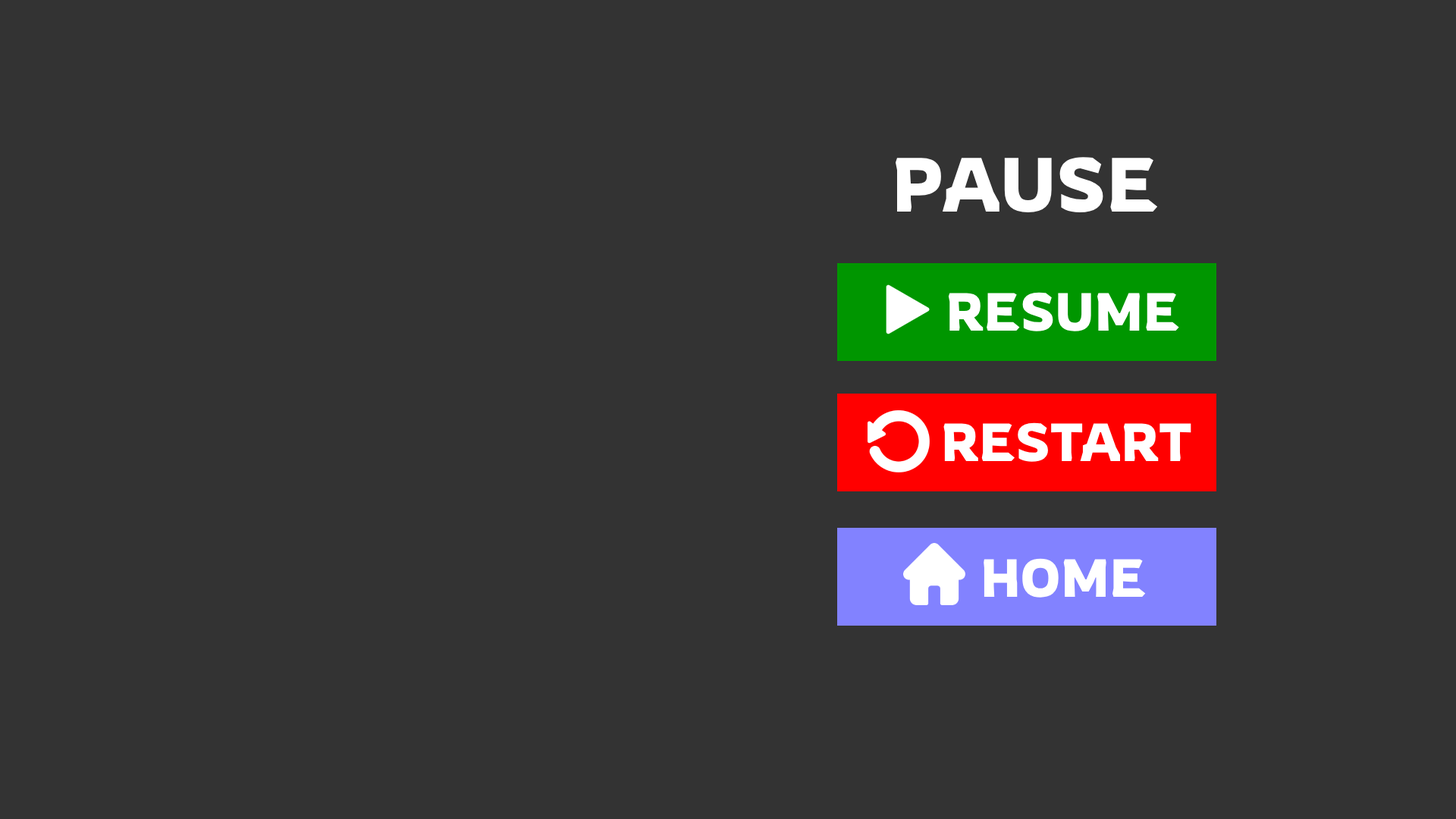
<style>
.page{position:relative;width:1456px;height:819px;background:#333333}
.page>*{position:absolute;margin:0}
.t1{font:75.8px "Rowdies-Regular";color:#ffffff}
.t2{font:53.1px "Rowdies-Regular";color:#ffffff}
</style>
<div class="page">
<p class="t1" style="left:896px;top:157px;width:262px;height:55px">PAUSE</p>
<p class="t2" style="left:948px;top:292px;width:231px;height:39px">RESUME</p>
<p class="t2" style="left:943px;top:422px;width:248px;height:40px">RESTART</p>
<p class="t2" style="left:984px;top:558px;width:162px;height:40px">HOME</p>
</div>
